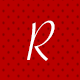
<style>
.page{position:relative;width:80px;height:80px;background:#ba0000}
.page>*{position:absolute;margin:0}
.t1{font:60px "SavoyeLetPlain";color:#ffffff}
</style>
<div class="page">
<p class="t1" style="left:27px;top:20px;width:28px;height:41px">R</p>
</div>
